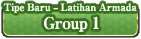
<style>
.page{position:relative;width:141px;height:39px}
.page>*{position:absolute;margin:0}
.t1{font:10px "RyuminPro-ExBold";letter-spacing:-0.04em;color:#fff6f1}
.t2{font:16px "RyuminPro-ExBold";letter-spacing:-0.04em;color:#fff6f1}
</style>
<div class="page">
<p class="t1" style="left:3px;top:3px;width:134px;height:10px">Tipe Baru – Latihan Armada</p>
<p class="t2" style="left:44px;top:16px;width:55px;height:16px">Group 1</p>
</div>
